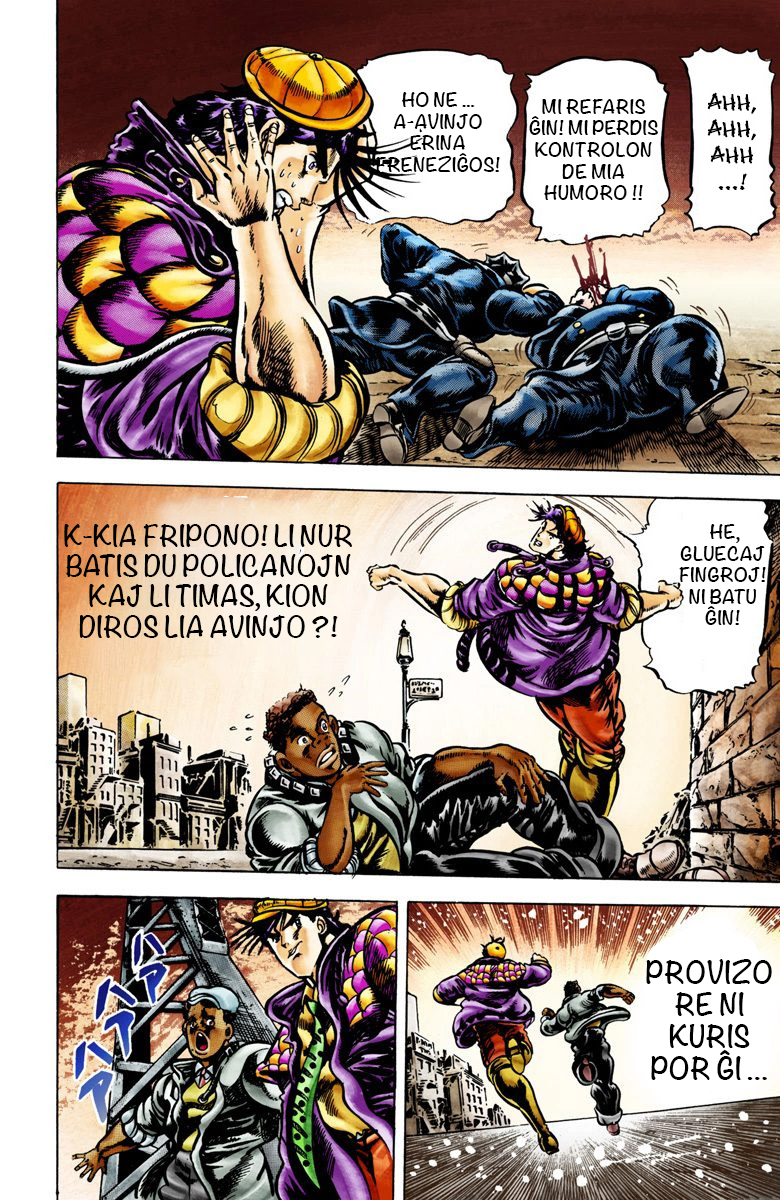
<style>
.page{position:relative;width:780px;height:1200px}
.page>*{position:absolute;margin:0}
.t1{font:18px "Noteworthy-Bold";color:#000000}
.t2{font:25.3px "Noteworthy-Bold";color:#000000}
.t3{font:26.7px "Noteworthy-Bold";color:#000000}
</style>
<div class="page">
<p class="t1" style="left:376px;top:92px;width:124px;height:80px;text-align:center">HO NE ... A-AVINJO ERINA FRENEZIĜOS!</p>
<p class="t1" style="left:529px;top:99px;width:129px;height:101px;text-align:center">MI REFARIS ĜIN! MI PERDIS KONTROLON DE MIA HUMORO !!</p>
<p class="t2" style="left:64px;top:524px;width:288px;height:114px;text-align:center">K-KIA FRIPONO! LI NUR BATIS DU POLICANOJN KAJ LI TIMAS, KION DIROS LIA AVINJO ?!</p>
<p class="t1" style="left:679px;top:524px;width:87px;height:101px;text-align:center">HE, GLUECAJ FINGROJ! NI BATU ĜIN!</p>
<p class="t3" style="left:646px;top:959px;width:126px;height:121px;text-align:center">PROVIZORE NI KURIS POR ĜI …</p>
</div>
